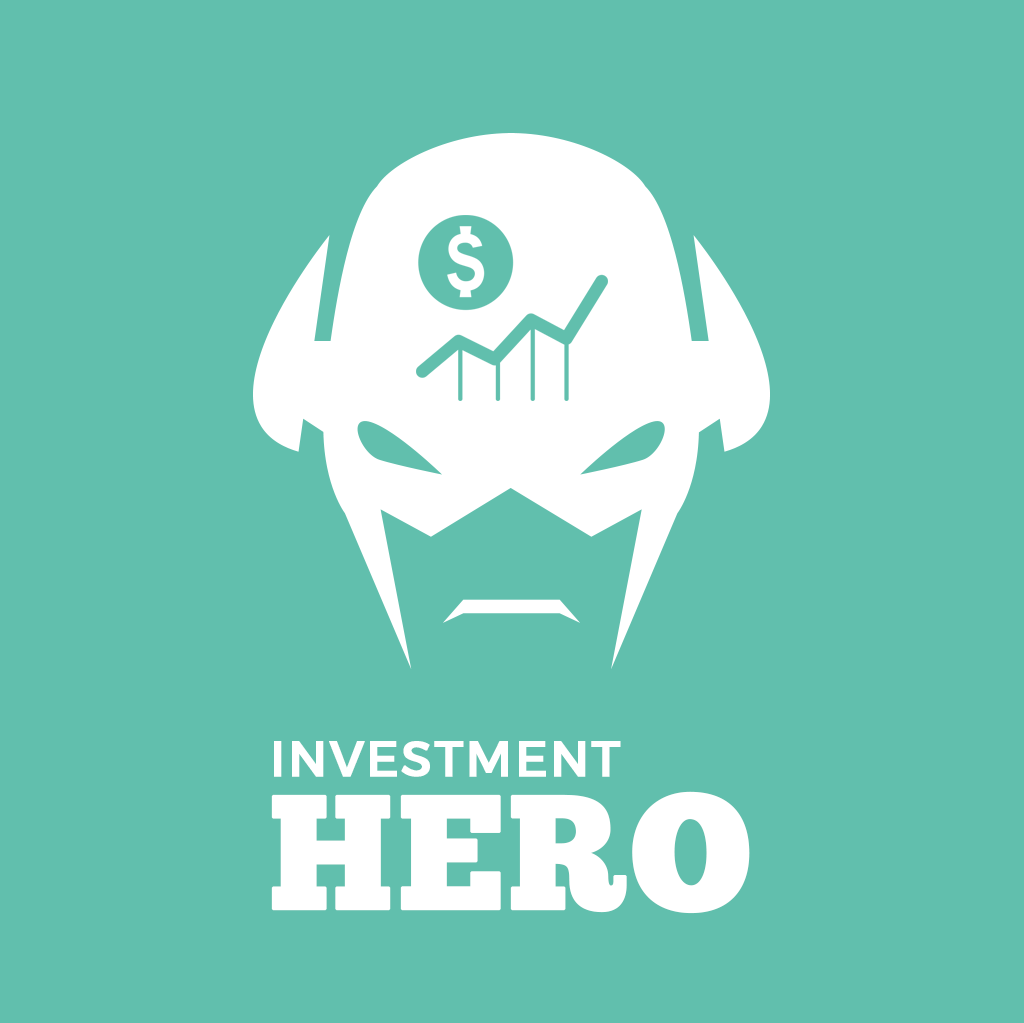
<style>
.page{position:relative;width:1024px;height:1023px;background:#61bfad}
.page>*{position:absolute;margin:0}
.t1{font:49.9px "Montserrat-Regular";letter-spacing:0.02em;color:#ffffff;text-transform:uppercase;font-weight:bold}
.t2{font:161.6px "ChunkFive-Roman";color:#ffffff;text-transform:uppercase;font-weight:bold}
</style>
<div class="page">
<p class="t1" style="left:274px;top:741px;width:347px;height:36px">Investment</p>
<p class="t2" style="left:271px;top:791px;width:479px;height:123px">Hero</p>
</div>
